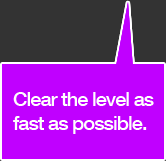
<style>
.page{position:relative;width:166px;height:161px;background:#c000ff}
.page>*{position:absolute;margin:0}
.t1{font:20px "HelveticaNeue-Medium";letter-spacing:-0.05em;color:#ffffff}
</style>
<div class="page">
<p class="t1" style="left:13px;top:92px;width:141px;height:42px">Clear the level as <br>fast as possible.</p>
</div>
